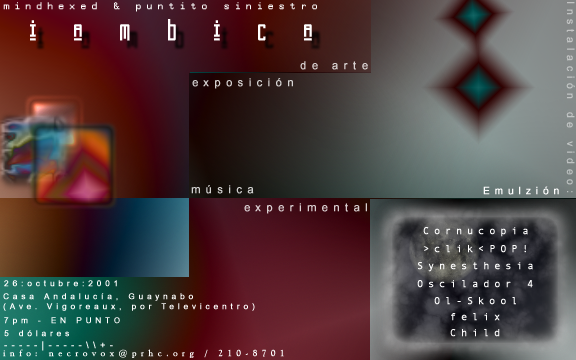
<style>
.page{position:relative;width:576px;height:360px}
.page>*{position:absolute;margin:0}
.t1{font:10px "GwdTE_437";letter-spacing:0.475em;color:#ffffff;font-weight:bold}
.t2{font:10px "ArialMT";letter-spacing:0.475em;color:#c2c3c3;font-weight:bold}
.t3{font:30px "Kashmir";letter-spacing:0.475em;color:#ffffff;font-weight:bold}
.t4{font:11px "ArialMT";letter-spacing:0.475em;color:#d9d4d3;font-weight:bold}
.t5{font:11px "ArialMT";letter-spacing:0.475em;color:#d3cece;font-weight:bold}
.t6{font:11px "ArialMT";letter-spacing:0.475em;color:#d0cfcf;font-weight:bold}
.t7{font:10px "ArialMT";letter-spacing:0.475em;color:#ffffff;font-weight:bold}
.t8{font:11px "ArialMT";letter-spacing:0.475em;color:#d7cdcf;font-weight:bold}
.t9{font:10px "AndaleMono";letter-spacing:0.475em;color:#ffffff;font-weight:bold}
.t10{font:8px "ArialMT";letter-spacing:0.475em;color:#ffffff;font-weight:bold}
.t11{font:10px "AndaleMono";letter-spacing:0.475em;color:#fefdfd;font-weight:bold}
.t12{font:9px "ArialMT";letter-spacing:0.475em;font-weight:bold}
.t13{font:9px "GoudyOldStyleBT-Roman";letter-spacing:0.475em;color:#ffffff;font-weight:bold}
</style>
<div class="page">
<p class="t1" style="left:3px;top:2px;width:314px;height:10px">mindhexed &amp; puntito siniestro</p>
<p class="t2" style="left:566px;top:2px;width:9px;height:191px;rotate:90deg">Instalación de video:</p>
<p class="t3" style="left:30px;top:19px;width:282px;height:22px">i a m b i c a</p>
<p class="t4" style="left:300px;top:61px;width:68px;height:9px">de arte</p>
<p class="t5" style="left:192px;top:78px;width:101px;height:11px">exposición</p>
<p class="t6" style="left:191px;top:185px;width:63px;height:9px">música</p>
<p class="t7" style="left:483px;top:186px;width:76px;height:9px">Emulzión</p>
<p class="t8" style="left:244px;top:203px;width:123px;height:11px">experimental</p>
<p class="t9" style="left:423px;top:227px;width:105px;height:10px">Cornucopia</p>
<p class="t9" style="left:424px;top:245px;width:102px;height:8px">&gt;clik&lt;POP!</p>
<p class="t9" style="left:418px;top:262px;width:115px;height:10px">Synesthesia</p>
<p class="t10" style="left:4px;top:280px;width:113px;height:7px">26:octubre:2001</p>
<p class="t9" style="left:417px;top:280px;width:116px;height:8px">Oscilador 4</p>
<p class="t10" style="left:3px;top:293px;width:190px;height:8px">Casa Andalucía, Guaynabo</p>
<p class="t10" style="left:3px;top:303px;width:252px;height:8px">(Ave. Vigoreaux, por Televicentro)</p>
<p class="t9" style="left:434px;top:297px;width:82px;height:8px">Ol-Skool</p>
<p class="t10" style="left:4px;top:317px;width:116px;height:8px">7pm - EN PUNTO</p>
<p class="t9" style="left:451px;top:313px;width:49px;height:8px">felix</p>
<p class="t11" style="left:450px;top:329px;width:50px;height:8px">Child</p>
<p class="t10" style="left:4px;top:330px;width:65px;height:7px">5 dólares</p>
<p class="t12" style="left:4px;top:341px;width:109px;height:10px">-----|-----\\+-</p>
<p class="t13" style="left:3px;top:349px;width:281px;height:9px">info: necrovox@prhc.org / 210-8701</p>
</div>
